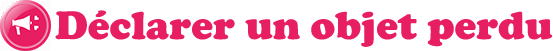
<style>
.page{position:relative;width:553px;height:51px;background:#ffffff}
.page>*{position:absolute;margin:0}
.t1{font:41px "CooperBlack";color:#e81e63}
</style>
<div class="page">
<p class="t1" style="left:55px;top:10px;width:498px;height:37px">Déclarer un objet perdu</p>
</div>
